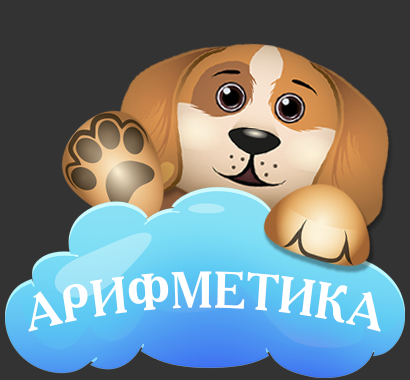
<style>
.page{position:relative;width:410px;height:380px;background:#333333}
.page>*{position:absolute;margin:0}
.t1{font:52px "Academy-Bold";color:#ffffff;scale:0.86 1}
</style>
<div class="page">
<p class="t1" style="left:28px;top:271px;width:353px;height:61px">АРИФМЕТИКА</p>
</div>
